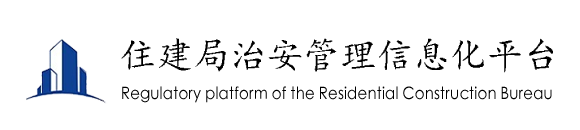
<style>
.page{position:relative;width:580px;height:130px;background:#ffffff}
.page>*{position:absolute;margin:0}
.t1{font:37px "¿¬Ìå";letter-spacing:0.01em;color:#000000}
.t2{font:16.9px "STXihei";letter-spacing:0.01em;color:#000000;scale:0.89 1}
</style>
<div class="page">
<p class="t1" style="left:121px;top:38px;width:432px;height:35px">住建局治安管理信息化平台</p>
<p class="t2" style="left:122px;top:86px;width:430px;height:17px">Regulatory platform of the Residential Construction Bureau</p>
</div>
